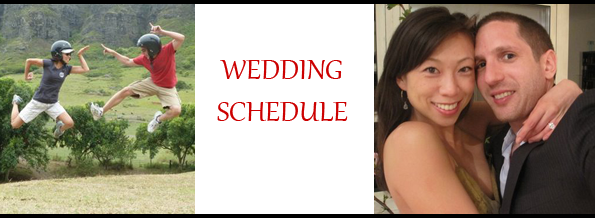
<style>
.page{position:relative;width:595px;height:218px;background:#ffffff}
.page>*{position:absolute;margin:0}
.t1{font:35px "Gabriola";color:#cc0000}
</style>
<div class="page">
<p class="t1" style="left:217px;top:60px;width:131px;height:61px;text-align:center">WEDDING<br>SCHEDULE</p>
</div>
